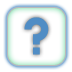
<style>
.page{position:relative;width:72px;height:72px;background:#ffffff}
.page>*{position:absolute;margin:0}
.t1{font:48px "RiskBold";color:#508dc5}
</style>
<div class="page">
<p class="t1" style="left:24px;top:17px;width:25px;height:38px">?</p>
</div>
